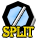
<style>
.page{position:relative;width:36px;height:40px;background:#ffffff}
.page>*{position:absolute;margin:0}
.t1{font:24.7px "Algerian";color:#ffffff}
.t2{font:14.8px "Algerian";color:#fee512;scale:0.8 1}
</style>
<div class="page">
<p class="t1" style="left:11px;top:6px;width:15px;height:22px">/</p>
<p class="t2" style="left:2px;top:26px;width:32px;height:11px">SPLIT</p>
</div>
